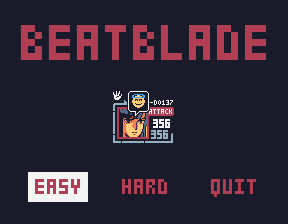
<style>
.page{position:relative;width:288px;height:224px;background:#191b2b}
.page>*{position:absolute;margin:0}
.t1{font:42px "treebyfivemodifi";color:#b13e53}
.t2{font:7.9px "3by5PixelFont"}
.t3{font:18px "treebyfivemodifi";color:#b13e53}
.t4{font:18px "treebyfivemodifi";color:#f4f4f4}
</style>
<div class="page">
<p class="t1" style="left:20px;top:24px;width:247px;height:36px">BEATBLADE</p>
<p class="t2" style="left:130px;top:100px;width:43px;height:5px">PAULA-D0137</p>
<p class="t3" style="left:34px;top:179px;width:47px;height:15px"><span class="t4">E</span>ASY</p>
<p class="t3" style="left:121px;top:178px;width:47px;height:16px">HARD</p>
<p class="t3" style="left:210px;top:178px;width:46px;height:20px">QUIT</p>
</div>
